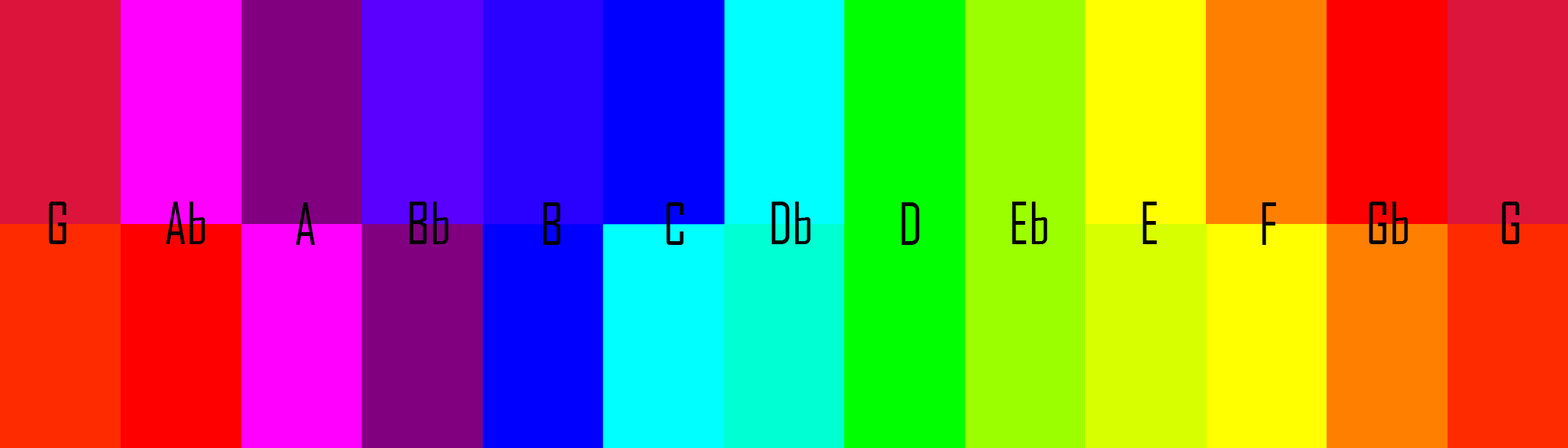
<style>
.page{position:relative;width:1568px;height:448px}
.page>*{position:absolute;margin:0}
.t1{font:56px "AgencyFB-Reg";color:#000000}
</style>
<div class="page">
<p class="t1" style="left:49px;top:202px;width:17px;height:42px">G</p>
<p class="t1" style="left:166px;top:202px;width:39px;height:42px">Ab</p>
<p class="t1" style="left:296px;top:202px;width:19px;height:43px">A</p>
<p class="t1" style="left:409px;top:202px;width:40px;height:42px">Bb</p>
<p class="t1" style="left:543px;top:202px;width:18px;height:43px">B</p>
<p class="t1" style="left:666px;top:202px;width:18px;height:43px">C</p>
<p class="t1" style="left:771px;top:202px;width:40px;height:42px">Db</p>
<p class="t1" style="left:901px;top:202px;width:19px;height:43px">D</p>
<p class="t1" style="left:1012px;top:202px;width:36px;height:42px">Eb</p>
<p class="t1" style="left:1142px;top:202px;width:15px;height:42px">E</p>
<p class="t1" style="left:1262px;top:202px;width:14px;height:43px">F</p>
<p class="t1" style="left:1369px;top:202px;width:39px;height:42px">Gb</p>
<p class="t1" style="left:1502px;top:202px;width:17px;height:42px">G</p>
</div>
